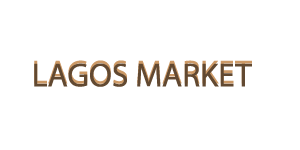
<style>
.page{position:relative;width:300px;height:150px;background:#ffffff}
.page>*{position:absolute;margin:0}
.t1{font:33.3px "MyriadPro-Regular"}
.t2{font:33.3px "MyriadPro-Regular";color:#624931}
</style>
<div class="page">
<p class="t1" style="left:34px;top:60px;width:218px;height:24px">LAGOS MARKET</p>
<p class="t2" style="left:34px;top:63px;width:218px;height:24px">LAGOS MARKET</p>
</div>
